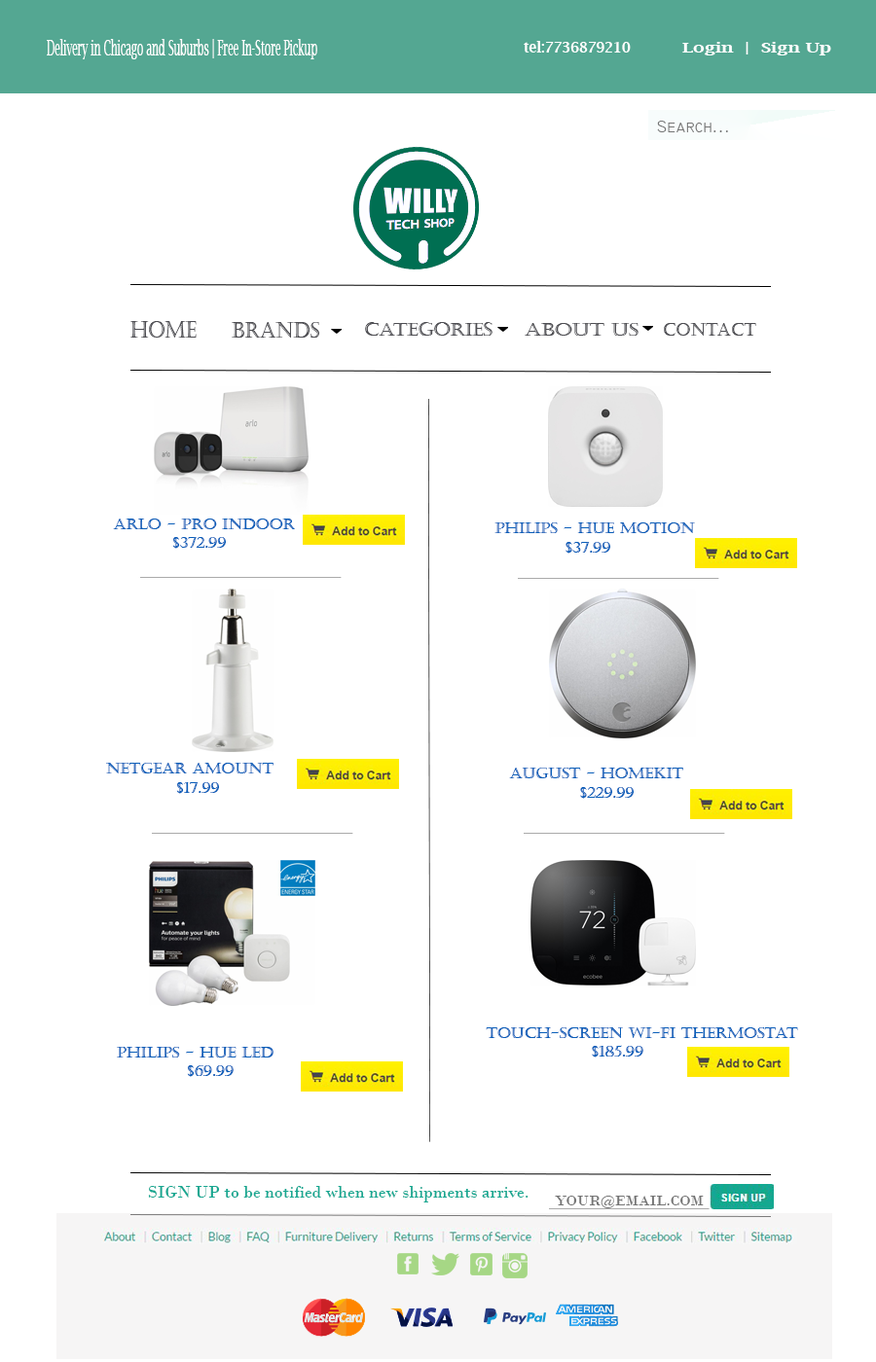
<style>
.page{position:relative;width:876px;height:1362px;background:#ffffff}
.page>*{position:absolute;margin:0}
.t1{font:21.8px "LucidaBright";color:#ffffff;scale:0.47 1}
.t2{font:14.5px "LucidaBright-Demi";color:#ffffff;scale:0.95 1}
.t3{font:13.9px "LucidaBright-Demi";color:#ffffff;scale:1.32 1}
.t4{font:11.2px "LucidaBright-Demi";color:#ffffff;scale:1.32 1}
.t5{font:17.5px "Technic";color:#757575}
.t6{font:23.1px "Castellar";color:#4e4e53;scale:0.84 1}
.t7{font:22.3px "Castellar";color:#4e4e53;scale:0.88 1}
.t8{font:18.8px "Castellar";color:#4e4e53}
.t9{font:17.1px "Castellar";color:#4e4e53;scale:1.18 1}
.t10{font:17.1px "Castellar";color:#4e4e53}
.t11{font:15.6px "Castellar";color:#085eb9}
.t12{font:17.5px "BodoniMT";color:#16a791}
.t13{font:15px "BodoniMT";color:#757575;scale:1.04 1}
</style>
<div class="page">
<p class="t1" style="left:47px;top:39px;width:270px;height:20px">Delivery in Chicago and Suburbs | Free In-Store Pickup</p>
<p class="t2" style="left:523px;top:41px;width:107px;height:12px">tel:7736879210</p>
<p class="t3" style="left:682px;top:42px;width:149px;height:13px"><span class="t4"><br></span>Login  |  Sign Up</p>
<p class="t5" style="left:657px;top:121px;width:71px;height:11px">Search...</p>
<p class="t6" style="left:130px;top:321px;width:67px;height:17px">HOME</p>
<p class="t7" style="left:232px;top:322px;width:87px;height:16px">BRANDS</p>
<p class="t8" style="left:365px;top:322px;width:127px;height:14px">cATEGORIES</p>
<p class="t9" style="left:524px;top:323px;width:114px;height:13px">ABOUT US</p>
<p class="t10" style="left:663px;top:323px;width:93px;height:13px">CONTACT</p>
<p class="t11" style="left:113px;top:519px;width:182px;height:30px">Arlo - Pro Indoor<br>  $372.99</p>
<p class="t11" style="left:494px;top:522px;width:201px;height:32px">Philips - Hue Motion<br>  $37.99</p>
<p class="t11" style="left:106px;top:763px;width:167px;height:31px">NETGEAR aMount<br>  $17.99</p>
<p class="t11" style="left:509px;top:768px;width:174px;height:31px">August - HomeKit<br>  $229.99</p>
<p class="t11" style="left:485px;top:1027px;width:313px;height:30px">Touch-Screen Wi-Fi Thermostat<br>   $185.99</p>
<p class="t11" style="left:117px;top:1047px;width:156px;height:30px">Philips - hue LED<br>  $69.99</p>
<p class="t12" style="left:148px;top:1186px;width:380px;height:16px">SIGN UP to be notified when new shipments arrive.</p>
<p class="t13" style="left:555px;top:1196px;width:148px;height:12px">YOUR@EMAIL.COM</p>
</div>
